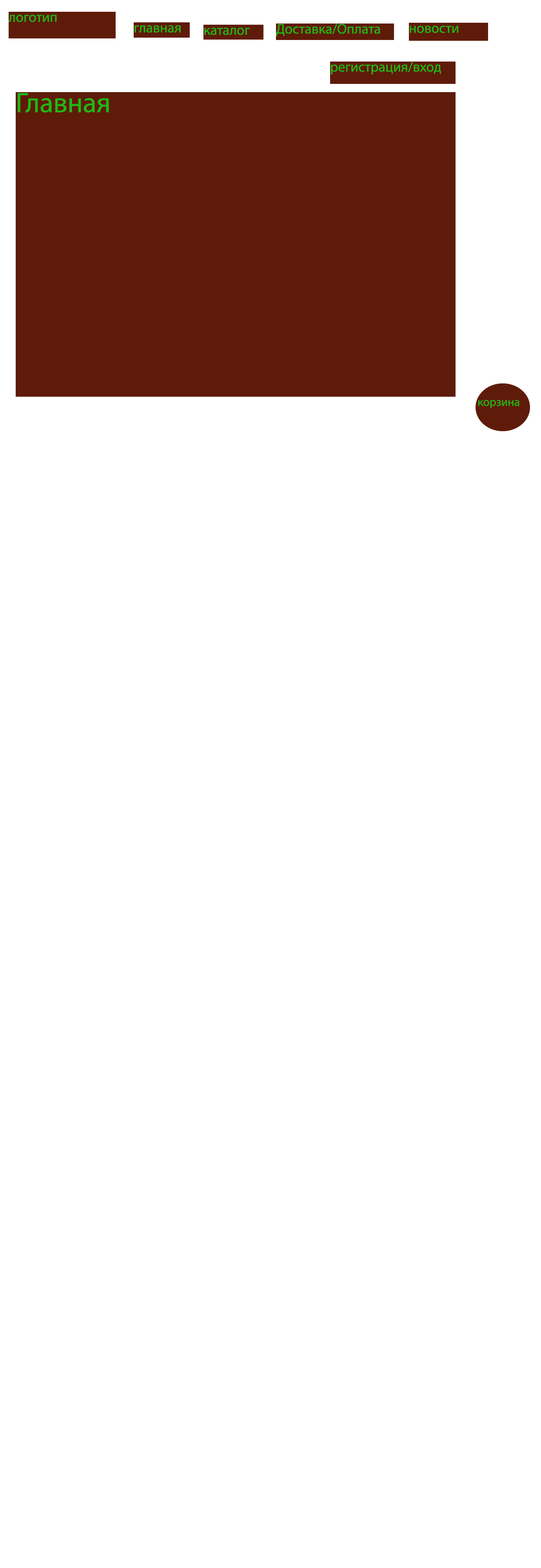
<style>
.page{position:relative;width:541px;height:1568px;background:#ffffff}
.page>*{position:absolute;margin:0}
.t1{font:14.1px "MyriadPro-Regular";color:#1cba14}
.t2{font:28.2px "MyriadPro-Regular";color:#1cba14}
.t3{font:11.8px "MyriadPro-Regular";color:#1cba14}
</style>
<div class="page">
<p class="t1" style="left:9px;top:15px;width:48px;height:7px">логотип</p>
<p class="t1" style="left:134px;top:25px;width:47px;height:8px">главная</p>
<p class="t1" style="left:204px;top:27px;width:46px;height:8px">каталог</p>
<p class="t1" style="left:276px;top:24px;width:104px;height:12px">Доставка/Оплата</p>
<p class="t1" style="left:410px;top:25px;width:48px;height:8px">новости</p>
<p class="t1" style="left:331px;top:62px;width:110px;height:12px">регистрация/вход</p>
<p class="t2" style="left:18px;top:93px;width:91px;height:20px">Главная</p>
<p class="t3" style="left:478px;top:400px;width:41px;height:8px">корзина</p>
</div>
